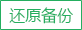
<style>
.page{position:relative;width:82px;height:30px;background:#ffffff}
.page>*{position:absolute;margin:0}
.t1{font:16px "MicrosoftYaHei";color:#25ae60}
</style>
<div class="page">
<p class="t1" style="left:9px;top:7px;width:64px;height:17px">还原备份</p>
</div>
